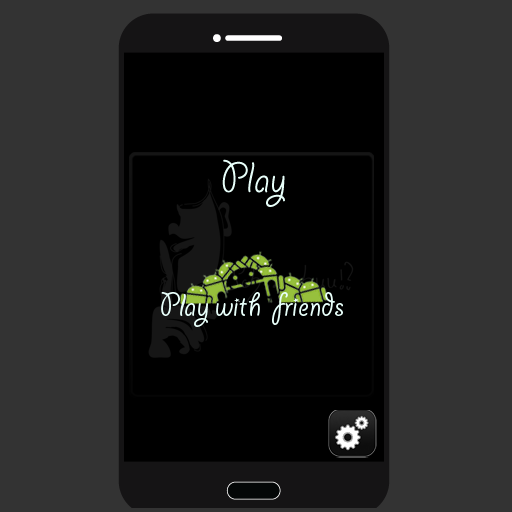
<style>
.page{position:relative;width:512px;height:512px;background:#333333}
.page>*{position:absolute;margin:0}
.t1{font:48px "GiddyupStd";color:#e8fffa}
.t2{font:36px "GiddyupStd";color:#e8fffa}
</style>
<div class="page">
<p class="t1" style="left:222px;top:159px;width:63px;height:48px">Play</p>
<p class="t2" style="left:161px;top:292px;width:182px;height:35px">Play with  friends</p>
</div>
